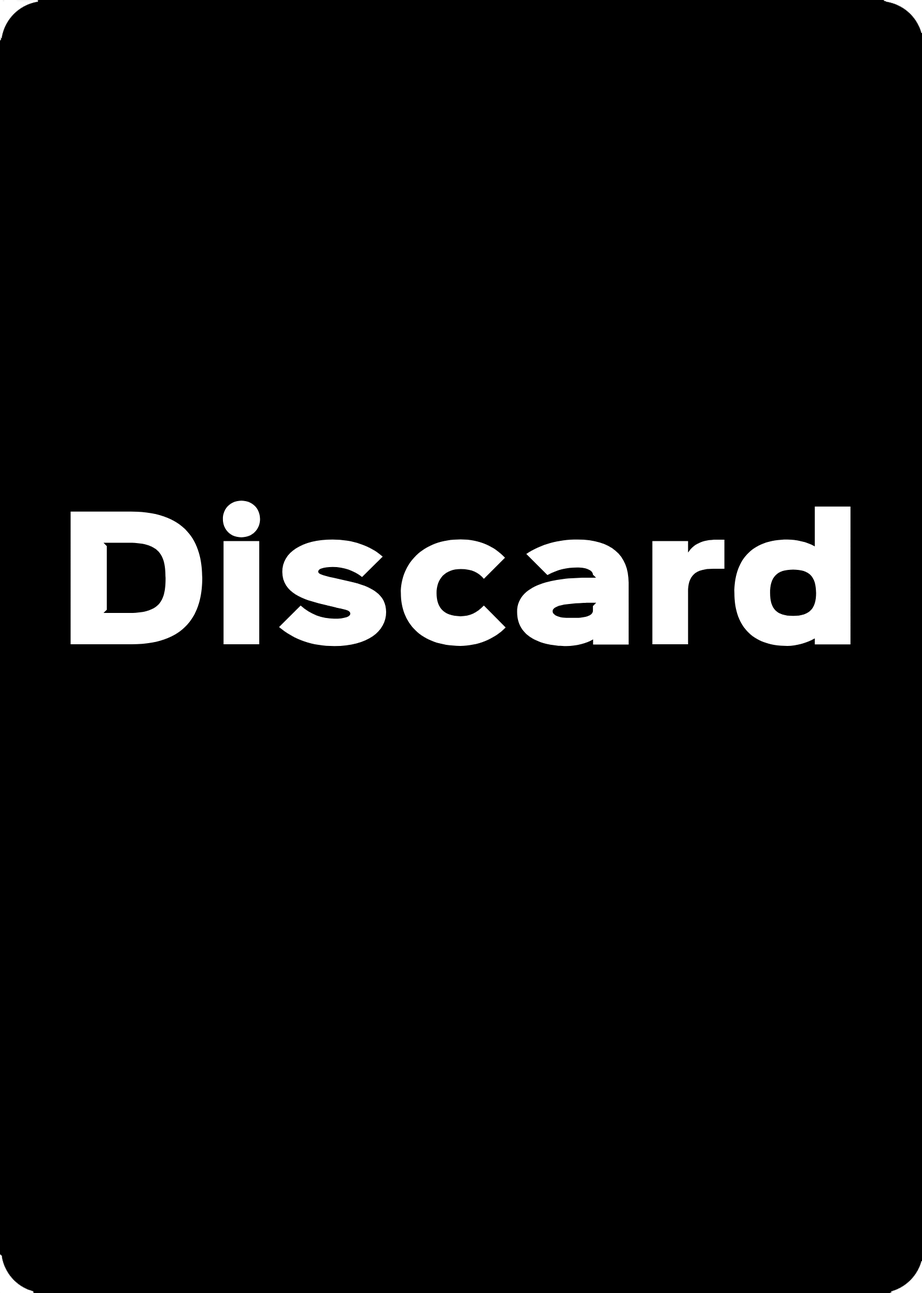
<style>
.page{position:relative;width:922px;height:1293px;background:#000000}
.page>*{position:absolute;margin:0}
.t1{font:163.8px "SinkinSans-900XBlack";color:#ffffff}
</style>
<div class="page">
<p class="t1" style="left:70px;top:500px;width:781px;height:146px">Discard</p>
</div>
